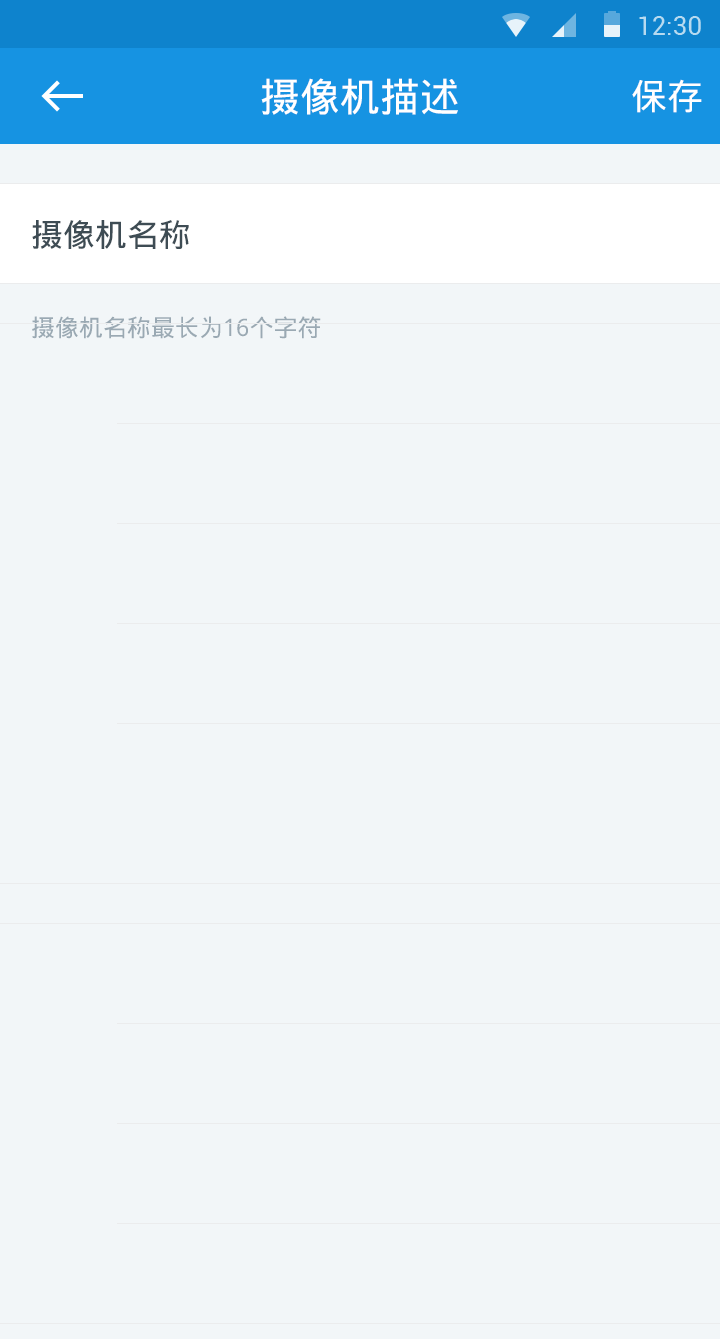
<style>
.page{position:relative;width:720px;height:1339px;background:#f2f6f8}
.page>*{position:absolute;margin:0}
.t1{font:40px "DroidSansFallback";color:#ffffff}
.t2{font:36px "DroidSansFallback";color:#ffffff}
.t3{font:32px "DroidSansFallback";color:#3e4c54}
.t4{font:24px "DroidSansFallback";color:#9aa9b3}
</style>
<div class="page">
<p class="t1" style="left:261px;top:78px;width:197px;height:37px">摄像机描述</p>
<p class="t2" style="left:632px;top:79px;width:70px;height:34px">保存</p>
<p class="t3" style="left:32px;top:220px;width:157px;height:29px">摄像机名称</p>
<p class="t4" style="left:32px;top:316px;width:289px;height:23px">摄像机名称最长为16个字符</p>
</div>
